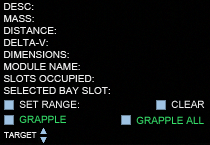
<style>
.page{position:relative;width:210px;height:145px}
.page>*{position:absolute;margin:0}
.t1{font:10px/12px "ArialMT";color:#eeeeee}
.t2{font:10px "ArialMT";color:#eeeeee}
.t3{font:10px "ArialMT";color:#35de69}
.t4{font:8px "ArialMT";color:#eeeeee;font-variant:small-caps}
</style>
<div class="page">
<p class="t1" style="left:3px;top:3px;width:107px;height:91px">DESC:<br>MASS:<br>DISTANCE: <br>DELTA-V:<br>DIMENSIONS:<br>MODULE NAME:<br>SLOTS OCCUPIED:<br>SELECTED BAY SLOT:</p>
<p class="t2" style="left:19px;top:100px;width:60px;height:8px">SET RANGE:</p>
<p class="t2" style="left:171px;top:100px;width:34px;height:8px">CLEAR</p>
<p class="t3" style="left:19px;top:115px;width:47px;height:8px">GRAPPLE</p>
<p class="t3" style="left:136px;top:116px;width:68px;height:8px">GRAPPLE ALL</p>
<p class="t4" style="left:4px;top:132px;width:33px;height:6px">TARGET</p>
</div>
